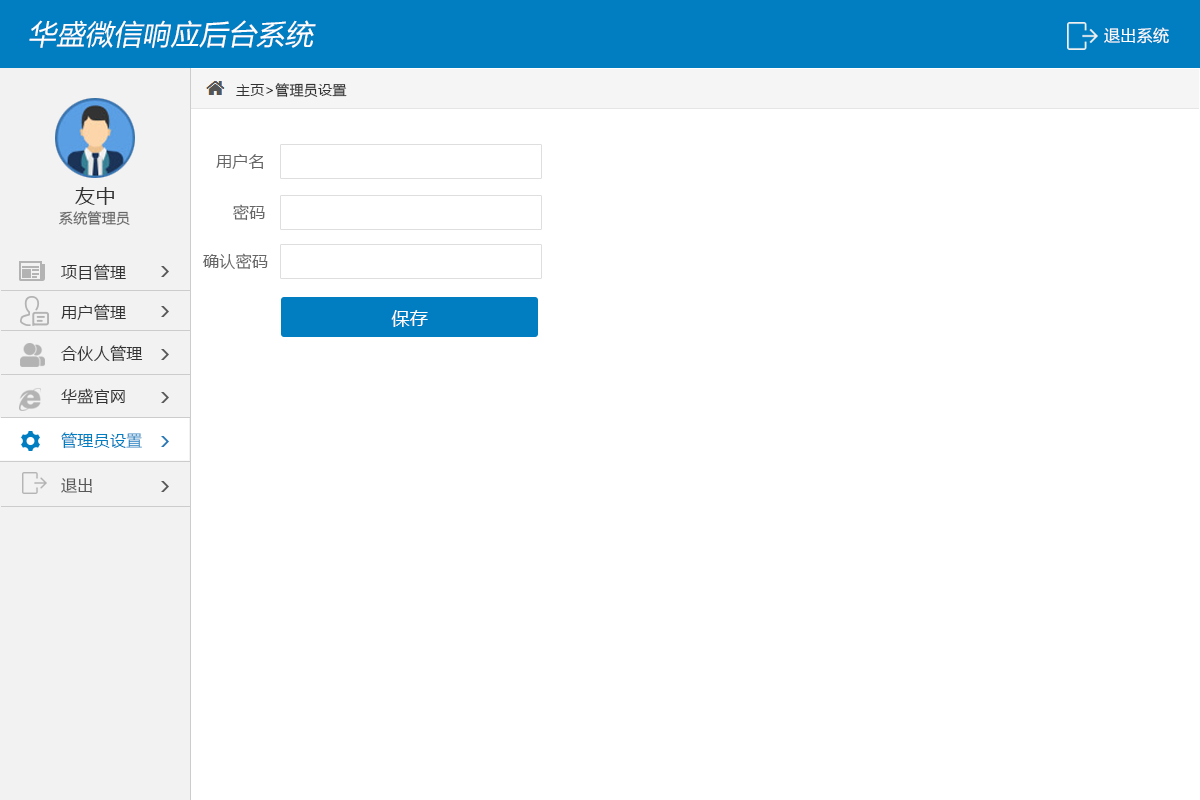
<style>
.page{position:relative;width:1200px;height:800px;background:#ffffff}
.page>*{position:absolute;margin:0}
.t1{font:28px "MicrosoftYaHei";letter-spacing:0.02em;color:#ffffff;font-style:italic}
.t2{font:16px "MicrosoftYaHei";letter-spacing:0.02em;color:#ffffff}
.t3{font:14px "MicrosoftYaHei";letter-spacing:0.02em;color:#333333}
.t4{font:16px "MicrosoftYaHei";letter-spacing:0.02em;color:#666666}
.t5{font:20px "MicrosoftYaHei";letter-spacing:0.02em;color:#333333}
.t6{font:14px "MicrosoftYaHei";letter-spacing:0.02em;color:#666666}
.t7{font:16px "MicrosoftYaHei";letter-spacing:0.02em;color:#333333}
.t8{font:18px "MicrosoftYaHei";letter-spacing:0.02em;color:#ffffff}
.t9{font:16px "MicrosoftYaHei";letter-spacing:0.02em;color:#017ec1}
.t10{font:16px "MicrosoftYaHei";letter-spacing:0.02em;color:#585858}
</style>
<div class="page">
<p class="t1" style="left:29px;top:20px;width:287px;height:28px">华盛微信响应后台系统</p>
<p class="t2" style="left:1104px;top:27px;width:65px;height:17px">退出系统</p>
<p class="t3" style="left:236px;top:83px;width:111px;height:15px">主页&gt;管理员设置</p>
<p class="t4" style="left:216px;top:154px;width:47px;height:15px">用户名</p>
<p class="t5" style="left:75px;top:187px;width:39px;height:18px">友中</p>
<p class="t4" style="left:233px;top:204px;width:32px;height:17px">密码</p>
<p class="t6" style="left:59px;top:211px;width:71px;height:15px">系统管理员</p>
<p class="t4" style="left:203px;top:253px;width:65px;height:16px">确认密码</p>
<p class="t7" style="left:61px;top:264px;width:65px;height:16px">项目管理</p>
<p class="t7" style="left:61px;top:304px;width:65px;height:16px">用户管理</p>
<p class="t8" style="left:391px;top:310px;width:37px;height:17px">保存</p>
<p class="t7" style="left:61px;top:345px;width:82px;height:17px">合伙人管理</p>
<p class="t7" style="left:61px;top:388px;width:64px;height:16px">华盛官网</p>
<p class="t9" style="left:61px;top:432px;width:81px;height:17px">管理员设置</p>
<p class="t10" style="left:61px;top:478px;width:31px;height:15px">退出</p>
</div>
